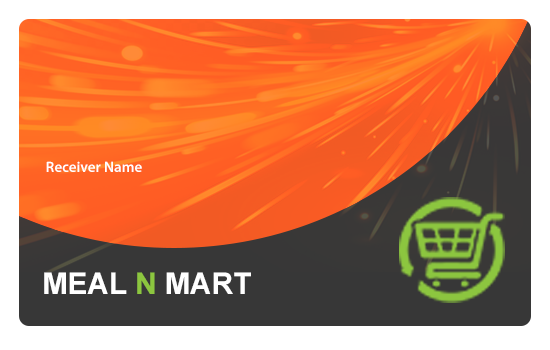
<style>
.page{position:relative;width:550px;height:350px}
.page>*{position:absolute;margin:0}
.t1{font:15px "MyriadPro-Semibold";color:#ffffff}
.t2{font:30px "Arial-BoldMT";color:#ffffff}
.t3{font:30px "Arial-BoldMT";color:#8cc63f}
</style>
<div class="page">
<p class="t1" style="left:46px;top:161px;width:96px;height:11px">Receiver Name</p>
<p class="t2" style="left:44px;top:272px;width:207px;height:22px">MEAL <span class="t3">N</span> MART</p>
</div>
